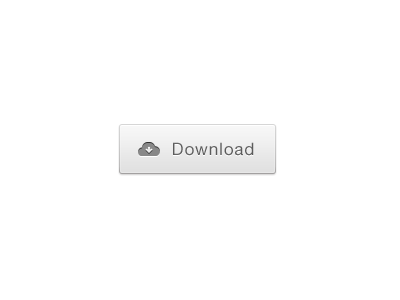
<style>
.page{position:relative;width:400px;height:300px;background:#ffffff}
.page>*{position:absolute;margin:0}
.t1{font:17px "HelveticaNeueLTStd-Roman";letter-spacing:0.05em;color:#5b5b5b}
</style>
<div class="page">
<p class="t1" style="left:173px;top:142px;width:81px;height:14px">Download</p>
</div>
